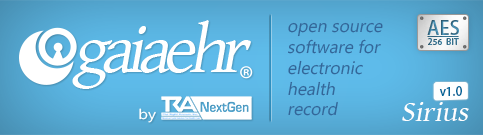
<style>
.page{position:relative;width:483px;height:135px}
.page>*{position:absolute;margin:0}
.t1{font:69.2px "GentiumBasic";letter-spacing:-0.1em;color:#ffffff;font-style:italic}
.t2{font:17.5px "Ebrima";color:#336699;font-style:italic}
.t3{font:18.8px "KozGoPro-Medium"}
.t4{font:8.3px "KozGoPro-Medium";letter-spacing:0.02em;color:#39718d}
.t5{font:12px "KozGoPr6N-Medium";color:#006699}
.t6{font:29.1px "GentiumBasic";color:#ffffff;font-style:italic}
.t7{font:14px "Ebrima";color:#ffffff;scale:1.18 1}
</style>
<div class="page">
<p class="t1" style="left:103px;top:26px;width:67px;height:47px">aia</p>
<p class="t1" style="left:167px;top:20px;width:84px;height:53px">ehr</p>
<p class="t2" style="left:288px;top:22px;width:95px;height:94px">open source<br>software for<br>electronic <br>health<br>record</p>
<p class="t3" style="left:427px;top:20px;width:32px;height:15px">AES</p>
<p class="t1" style="left:72px;top:40px;width:41px;height:49px">g</p>
<p class="t4" style="left:428px;top:38px;width:31px;height:7px">256  BIT</p>
<p class="t5" style="left:439px;top:86px;width:23px;height:10px">v1.0</p>
<p class="t6" style="left:402px;top:102px;width:67px;height:19px">Sirius</p>
<p class="t7" style="left:139px;top:108px;width:17px;height:15px">by</p>
</div>
